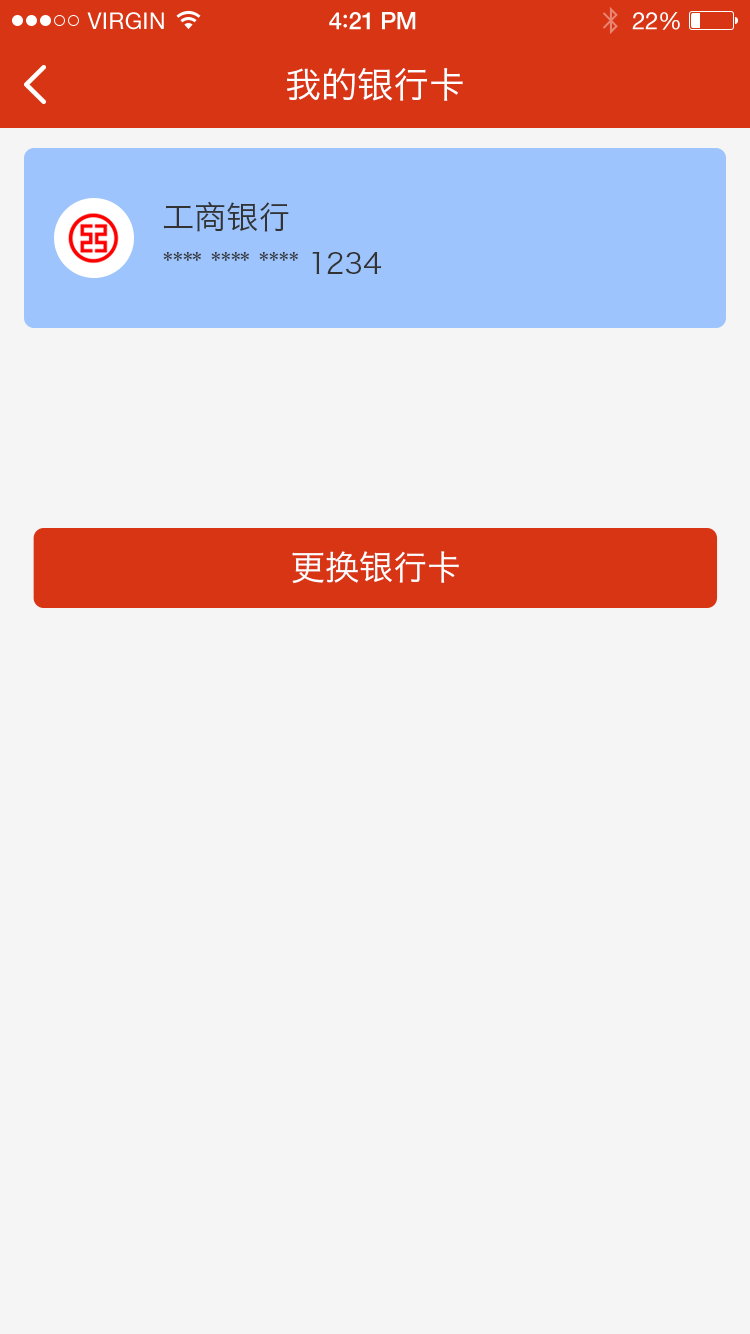
<style>
.page{position:relative;width:750px;height:1334px;background:#f5f5f5}
.page>*{position:absolute;margin:0}
.t1{font:23px "HelveticaNeue";letter-spacing:0.02em;color:#ffffff}
.t2{font:24px "HelveticaNeue-Medium";letter-spacing:-0.02em;color:#ffffff}
.t3{font:26px "Avenir-Medium";letter-spacing:-0.02em;color:#ffffff}
.t4{font:24px "HelveticaNeue";letter-spacing:-0.02em;color:#ffffff}
.t5{font:36px "HiraginoSansGB-W3";color:#ffffff}
.t6{font:32px "HiraginoSansGB-W3";color:#333333}
.t7{font:28px "HiraginoSansGB-W3";color:#333333}
.t8{font:34px "HiraginoSansGB-W3";color:#ffffff}
</style>
<div class="page">
<p class="t1" style="left:87px;top:12px;width:77px;height:18px">VIRGIN</p>
<p class="t2" style="left:329px;top:12px;width:87px;height:18px">4<span class="t3">:</span>21 PM</p>
<p class="t4" style="left:632px;top:12px;width:48px;height:18px">22%</p>
<p class="t5" style="left:287px;top:68px;width:176px;height:33px">我的银行卡</p>
<p class="t6" style="left:164px;top:201px;width:125px;height:31px">工商银行</p>
<p class="t7" style="left:163px;top:252px;width:218px;height:23px">**** **** **** 1234</p>
<p class="t8" style="left:292px;top:551px;width:167px;height:33px">更换银行卡</p>
</div>
